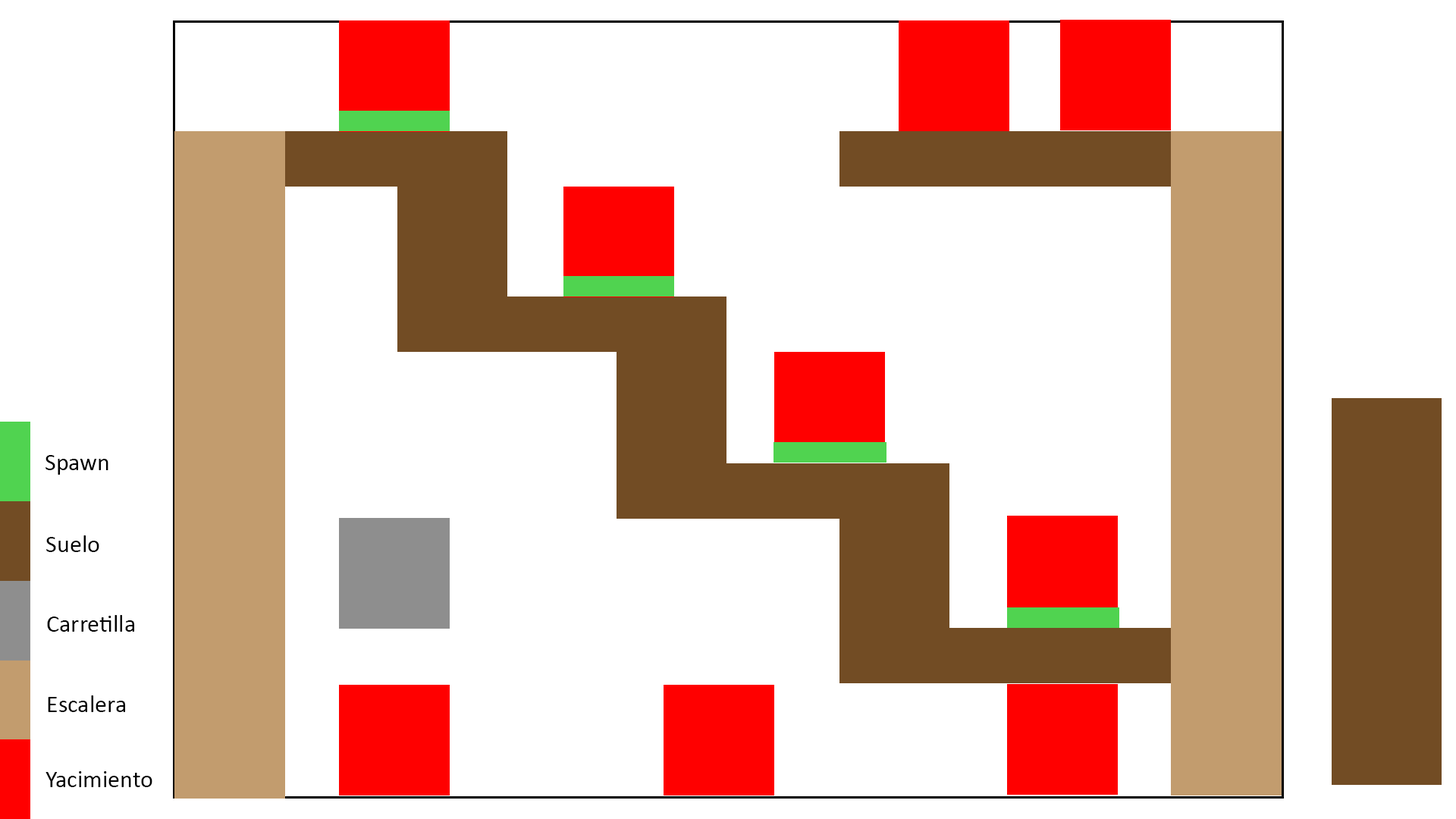
<style>
.page{position:relative;width:1456px;height:819px;background:#ffffff}
.page>*{position:absolute;margin:0}
.t1{font:24.3px "Calibri";color:#000000}
</style>
<div class="page">
<p class="t1" style="left:45px;top:455px;width:63px;height:20px">Spawn</p>
<p class="t1" style="left:46px;top:535px;width:53px;height:17px">Suelo</p>
<p class="t1" style="left:47px;top:615px;width:87px;height:17px">Carretilla</p>
<p class="t1" style="left:48px;top:695px;width:77px;height:17px">Escalera</p>
<p class="t1" style="left:45px;top:771px;width:107px;height:16px">Yacimiento</p>
</div>
